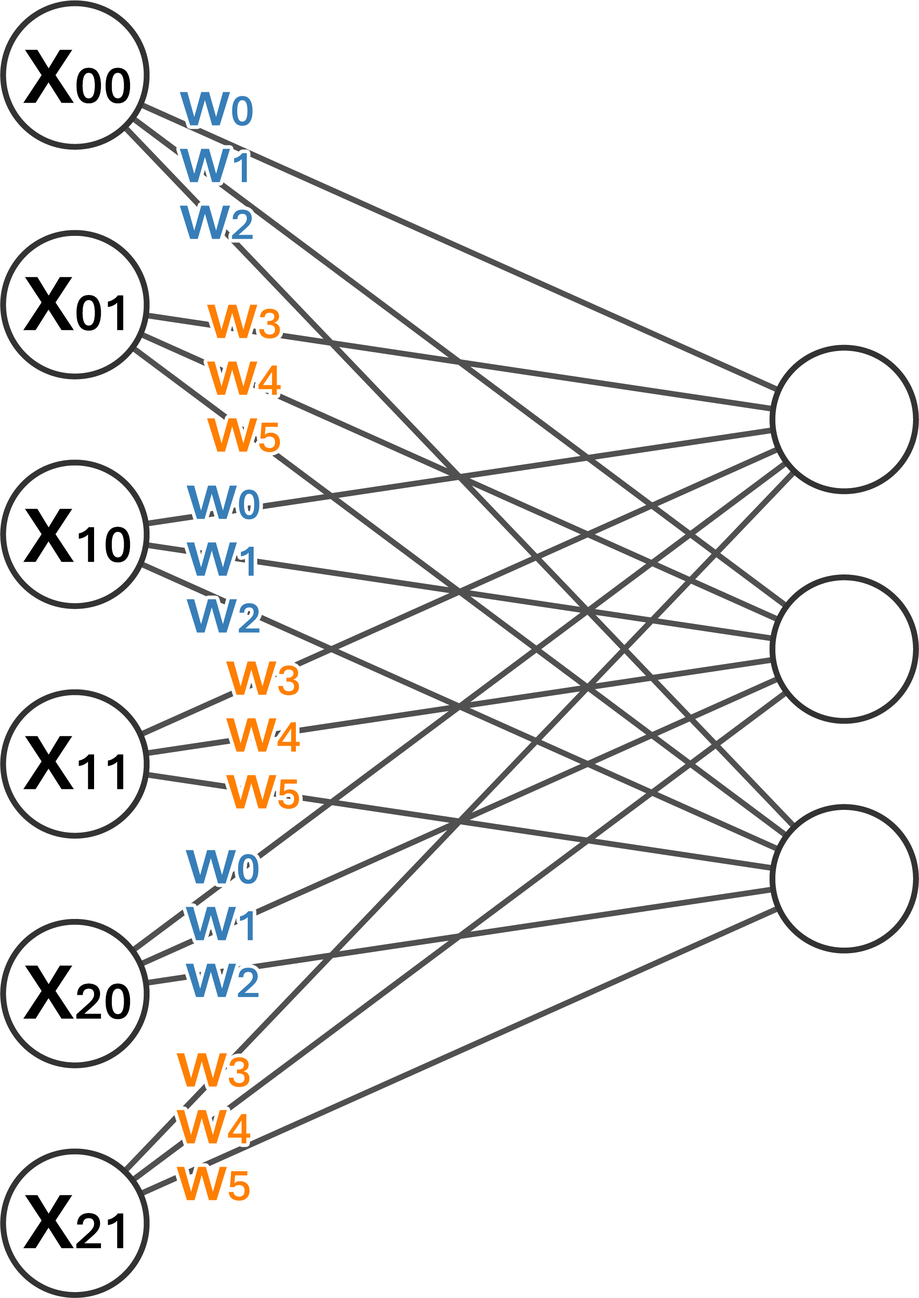
<style>
.page{position:relative;width:919px;height:1298px;background:#ffffff}
.page>*{position:absolute;margin:0}
.t1{font:54.5px "Aptos-SemiBold";color:#000000}
.t2{font:109.1px "Aptos-SemiBold";color:#000000}
.t3{font:68.2px/56.8px "Aptos-SemiBold";color:#377eb8}
.t4{font:45.4px/56.8px "Aptos-SemiBold";color:#377eb8}
.t5{font:68.2px/56.8px "Aptos-SemiBold";color:#ff7f00}
.t6{font:45.4px/56.8px "Aptos-SemiBold";color:#ff7f00}
</style>
<div class="page">
<p class="t1" style="left:23px;top:50px;width:107px;height:54px"><span class="t2">x</span>00</p>
<p class="t3" style="left:179px;top:92px;width:74px;height:147px;text-align:center">w<span class="t4">0<br></span>w<span class="t4">1<br></span>w<span class="t4">2</span></p>
<p class="t1" style="left:23px;top:277px;width:101px;height:54px"><span class="t2">x</span>01</p>
<p class="t5" style="left:207px;top:304px;width:74px;height:148px;text-align:center">w<span class="t6">3<br></span>w<span class="t6">4<br></span>w<span class="t6">5</span></p>
<p class="t3" style="left:186px;top:485px;width:73px;height:148px;text-align:center">w<span class="t4">0<br></span>w<span class="t4">1<br></span>w<span class="t4">2</span></p>
<p class="t1" style="left:23px;top:508px;width:107px;height:55px"><span class="t2">x</span>10</p>
<p class="t5" style="left:226px;top:661px;width:74px;height:148px;text-align:center">w<span class="t6">3<br></span>w<span class="t6">4<br></span>w<span class="t6">5</span></p>
<p class="t1" style="left:23px;top:736px;width:101px;height:53px"><span class="t2">x</span>11</p>
<p class="t3" style="left:185px;top:850px;width:74px;height:147px;text-align:center">w<span class="t4">0<br></span>w<span class="t4">1<br></span>w<span class="t4">2</span></p>
<p class="t1" style="left:23px;top:965px;width:107px;height:54px"><span class="t2">x</span>20</p>
<p class="t5" style="left:176px;top:1053px;width:74px;height:148px;text-align:center">w<span class="t6">3<br></span>w<span class="t6">4<br></span>w<span class="t6">5</span></p>
<p class="t1" style="left:23px;top:1195px;width:101px;height:53px"><span class="t2">x</span>21</p>
</div>
